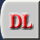
<style>
.page{position:relative;width:40px;height:40px;background:#c8c8c8}
.page>*{position:absolute;margin:0}
.t1{font:18px "MyungjoXB-HM"}
</style>
<div class="page">
<p class="t1" style="left:10px;top:14px;width:22px;height:14px">DL</p>
</div>
